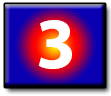
<style>
.page{position:relative;width:111px;height:96px}
.page>*{position:absolute;margin:0}
.t1{font:72px "MyriadPro-Bold";color:#ffffff}
</style>
<div class="page">
<p class="t1" style="left:38px;top:20px;width:34px;height:49px">3</p>
</div>
